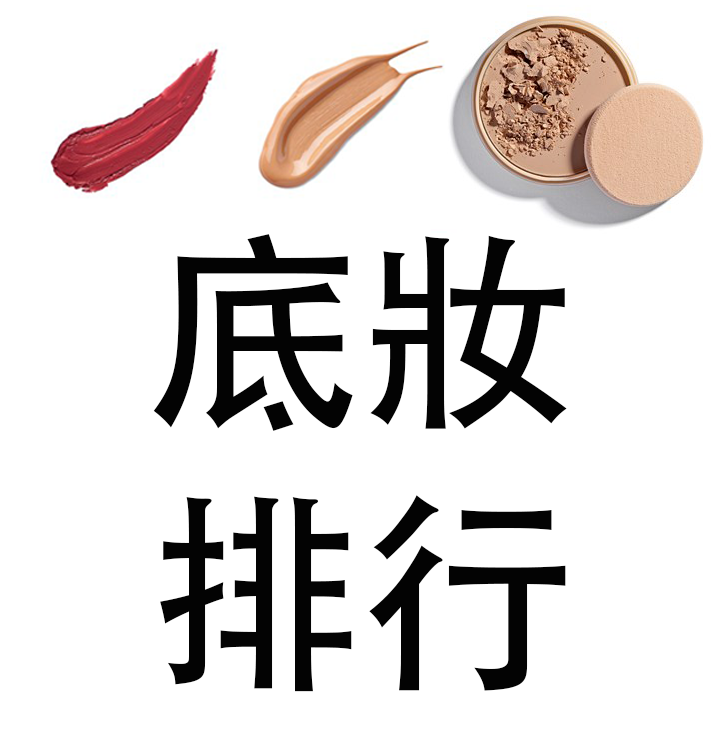
<style>
.page{position:relative;width:720px;height:736px;background:#ffffff}
.page>*{position:absolute;margin:0}
.t1{font:216.6px "AdobeHeitiStd-Regular";letter-spacing:-0.02em;color:#030303;text-transform:uppercase}
</style>
<div class="page">
<p class="t1" style="left:153px;top:234px;width:414px;height:458px;text-align:center">底妝<br>排行</p>
</div>
